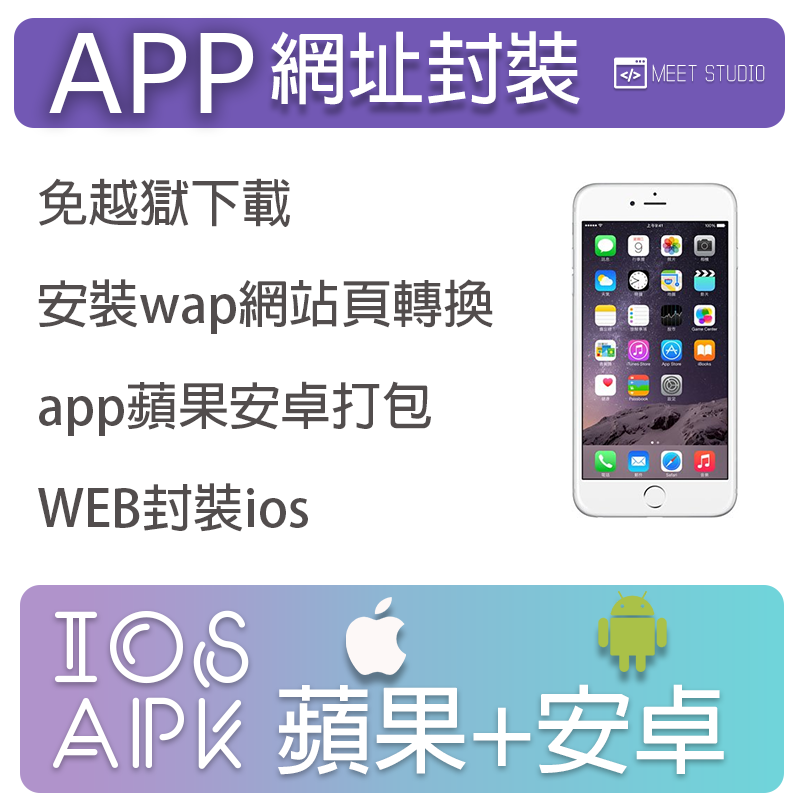
<style>
.page{position:relative;width:800px;height:800px;background:#ffffff}
.page>*{position:absolute;margin:0}
.t1{font:110.4px "Verdana";color:#ffffff}
.t2{font:78.5px "AdobeFanHeitiStd-Bold";color:#ffffff}
.t3{font:22.5px "Vanadine-Regular";color:#ffffff}
.t4{font:51.1px/101.8px "AdobeFanHeitiStd-Bold";color:#524d4d}
.t5{font:100.5px/85.8px "Santanelli-PERSONAL-USE-ONLY";color:#ffffff}
.t6{font:96.5px "AdobeFanHeitiStd-Bold";color:#ffffff}
</style>
<div class="page">
<p class="t1" style="left:49px;top:33px;width:205px;height:80px">APP</p>
<p class="t2" style="left:271px;top:31px;width:309px;height:74px">網址封裝</p>
<p class="t3" style="left:652px;top:64px;width:113px;height:19px">MEET STUDIO</p>
<p class="t4" style="left:38px;top:178px;width:455px;height:354px;text-align:right">免越獄下載<br>安裝wap網站頁轉換<br>app蘋果安卓打包<br>WEB封裝ios</p>
<p class="t5" style="left:53px;top:610px;width:196px;height:159px;text-align:right">IOS<br>APK</p>
<p class="t6" style="left:278px;top:684px;width:446px;height:91px">蘋果+安卓</p>
</div>
